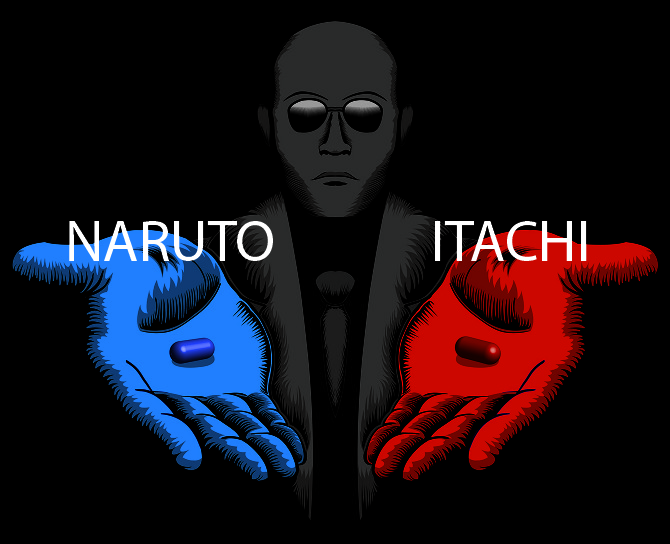
<style>
.page{position:relative;width:670px;height:544px;background:#000000}
.page>*{position:absolute;margin:0}
.t1{font:58.3px "MyriadPro-Regular";color:#ffffff}
</style>
<div class="page">
<p class="t1" style="left:69px;top:221px;width:204px;height:40px">NARUTO</p>
<p class="t1" style="left:435px;top:221px;width:152px;height:40px">ITACHI</p>
</div>
